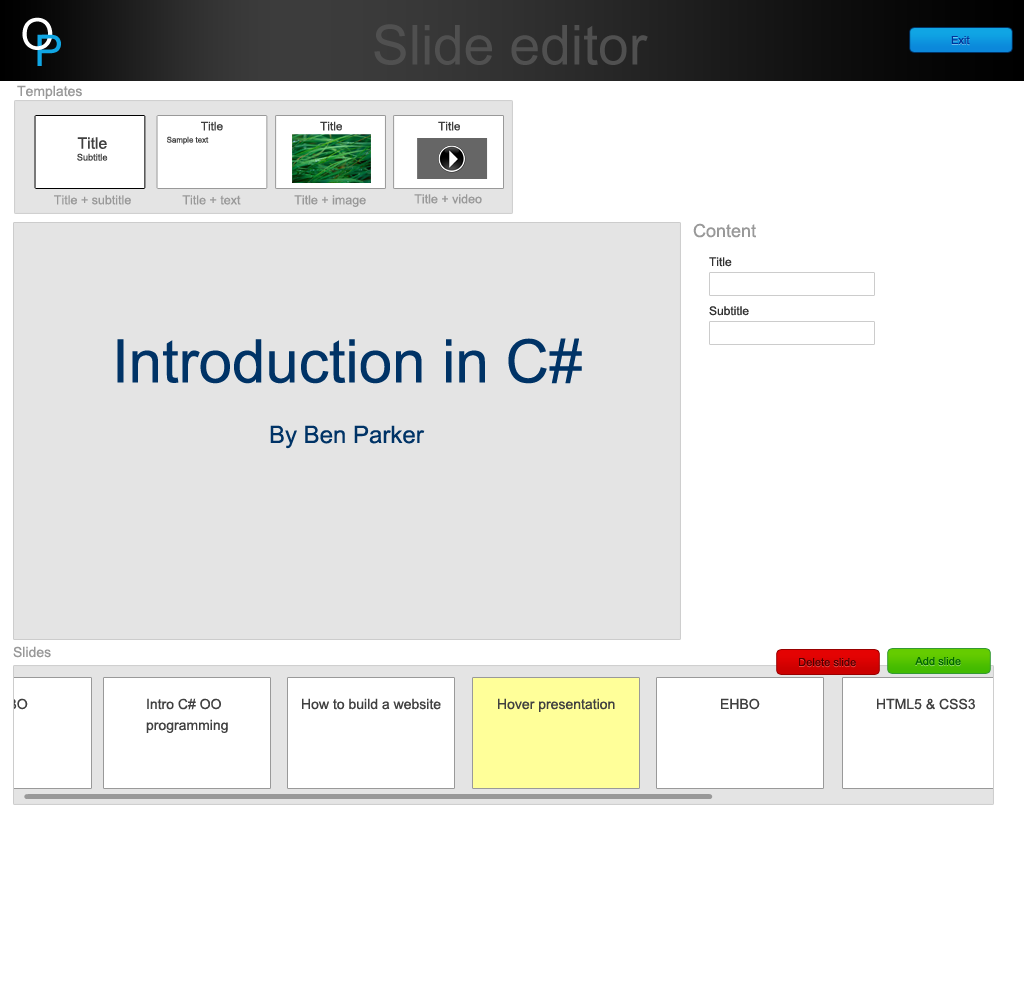
<style>
.page{position:relative;width:1024px;height:1000px;background:#ffffff}
.page>*{position:absolute;margin:0}
.t1{font:43.5px "ArialMT";color:#ffffff}
.t2{font:55px "ArialMT";color:#505050}
.t3{font:43.5px "ArialMT";color:#10a6e4}
.t4{font:11.1px "ArialMT";color:#003399}
.t5{font:14px "ArialMT";color:#999999}
.t6{font:11.8px "ArialMT";color:#404040}
.t7{font:15.7px "ArialMT";color:#404040}
.t8{font:7.9px "ArialMT";color:#404040}
.t9{font:9.2px "ArialMT";color:#404040}
.t10{font:12.5px "ArialMT";color:#999999}
.t11{font:18px "ArialMT";color:#999999}
.t12{font:12px "ArialMT";color:#333333}
.t13{font:60px "ArialMT";color:#003366}
.t14{font:24px "ArialMT";color:#003366}
.t15{font:11.1px "ArialMT";color:#530000}
.t16{font:11.1px "ArialMT";color:#006600}
.t17{font:14px/21px "ArialMT";color:#404040}
.t18{font:14px "ArialMT";color:#404040}
</style>
<div class="page">
<p class="t1" style="left:22px;top:17px;width:31px;height:33px">O</p>
<p class="t2" style="left:374px;top:24px;width:274px;height:41px">Slide editor</p>
<p class="t3" style="left:37px;top:34px;width:24px;height:32px">P</p>
<p class="t4" style="left:951px;top:36px;width:19px;height:9px">Exit</p>
<p class="t5" style="left:17px;top:85px;width:65px;height:14px">Templates</p>
<p class="t6" style="left:201px;top:121px;width:22px;height:10px">Title</p>
<p class="t6" style="left:320px;top:121px;width:22px;height:10px">Title</p>
<p class="t6" style="left:438px;top:121px;width:22px;height:10px">Title</p>
<p class="t7" style="left:77px;top:137px;width:30px;height:12px">Title</p>
<p class="t8" style="left:167px;top:136px;width:42px;height:9px">Sample text</p>
<p class="t9" style="left:77px;top:153px;width:31px;height:8px">Subtitle</p>
<p class="t10" style="left:54px;top:195px;width:77px;height:10px">Title + subtitle</p>
<p class="t10" style="left:182px;top:195px;width:59px;height:10px">Title + text</p>
<p class="t10" style="left:294px;top:195px;width:72px;height:12px">Title + image</p>
<p class="t10" style="left:414px;top:194px;width:68px;height:10px">Title + video</p>
<p class="t11" style="left:693px;top:223px;width:63px;height:15px">Content</p>
<p class="t12" style="left:709px;top:257px;width:23px;height:10px">Title</p>
<p class="t12" style="left:709px;top:306px;width:40px;height:10px">Subtitle</p>
<p class="t13" style="left:117px;top:338px;width:465px;height:46px">Introduction in C#</p>
<p class="t14" style="left:270px;top:425px;width:155px;height:24px">By Ben Parker</p>
<p class="t5" style="left:13px;top:646px;width:38px;height:12px">Slides</p>
<p class="t15" style="left:799px;top:658px;width:57px;height:9px">Delete slide</p>
<p class="t16" style="left:915px;top:657px;width:46px;height:9px">Add slide</p>
<p class="t17" style="left:146px;top:698px;width:82px;height:35px">Intro C# OO <br>programming</p>
<p class="t18" style="left:302px;top:698px;width:139px;height:12px">How to build a website</p>
<p class="t18" style="left:498px;top:698px;width:117px;height:14px">Hover presentation</p>
<p class="t18" style="left:721px;top:698px;width:39px;height:12px">EHBO</p>
</div>
